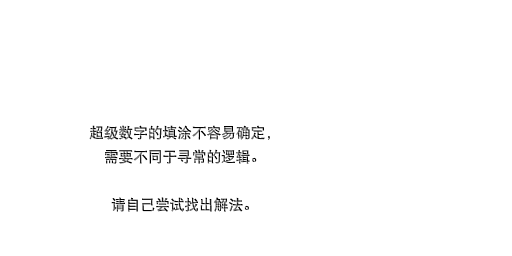
<style>
.page{position:relative;width:512px;height:256px;background:#ffffff}
.page>*{position:absolute;margin:0}
.t1{font:14.7px/24px "DFPHeiW5-GB"}
</style>
<div class="page">
<p class="t1" style="left:89px;top:125px;width:181px;height:87px;text-align:center">超级数字的填涂不容易确定，<br>需要不同于寻常的逻辑。<br><br>请自己尝试找出解法。</p>
</div>
